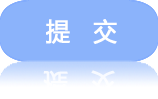
<style>
.page{position:relative;width:158px;height:99px;background:#8bb3fb}
.page>*{position:absolute;margin:0}
.t1{font:25px "MicrosoftYaHei";color:#ffffff;font-weight:bold;scale:0.95 1}
</style>
<div class="page">
<p class="t1" style="left:46px;top:19px;width:71px;height:25px">提   交</p>
<p class="t1" style="left:43px;top:70px;width:72px;height:26px;opacity:0.81">提   交</p>
</div>
